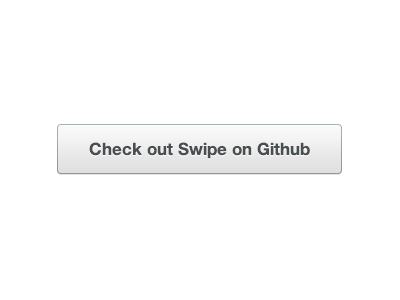
<style>
.page{position:relative;width:400px;height:300px;background:#ffffff}
.page>*{position:absolute;margin:0}
.t1{font:17px "HelveticaNeue-Bold";color:#494f50}
</style>
<div class="page">
<p class="t1" style="left:89px;top:142px;width:221px;height:17px">Check out Swipe on Github</p>
</div>
